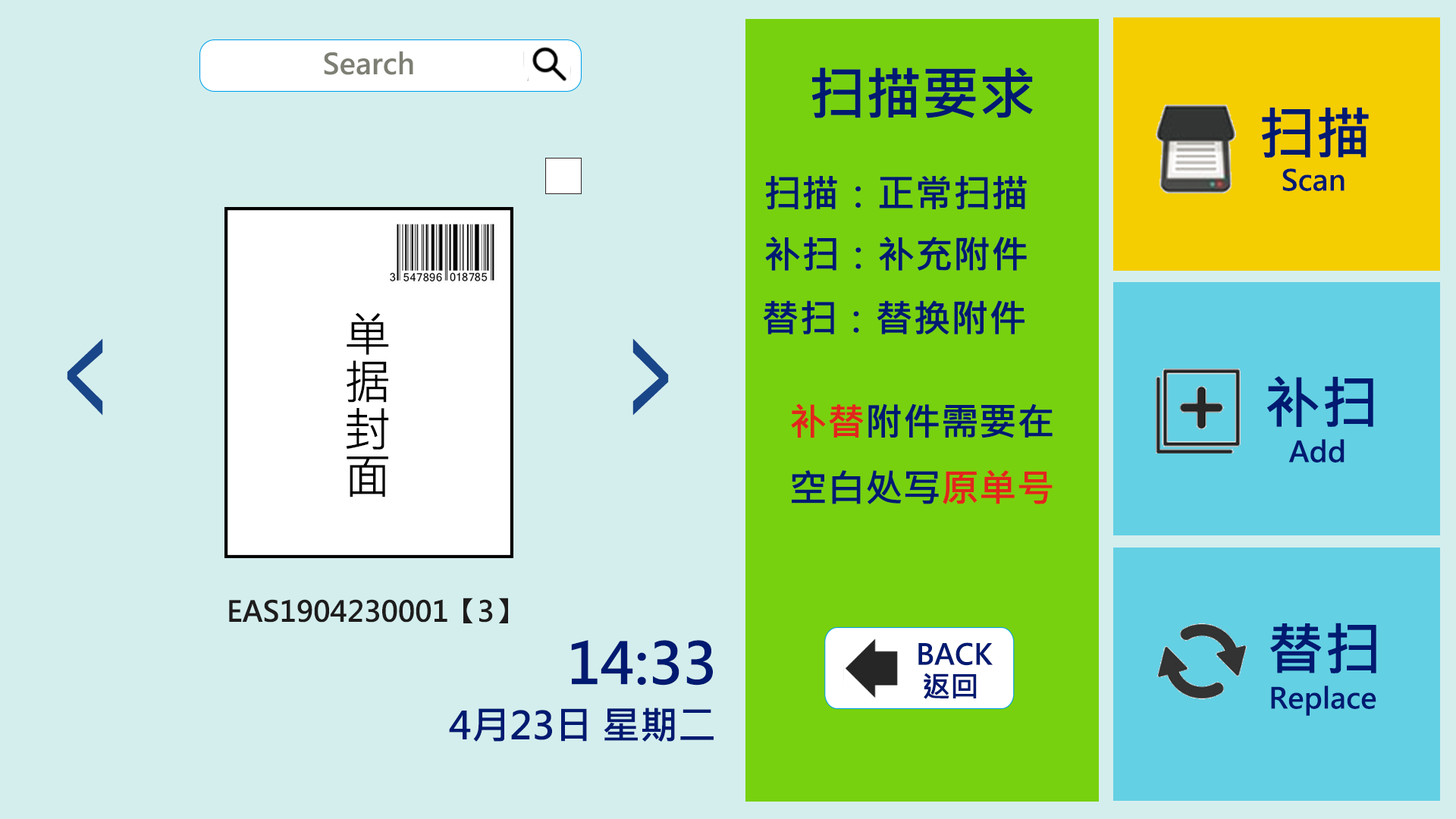
<style>
.page{position:relative;width:1456px;height:819px;background:#d4eeee}
.page>*{position:absolute;margin:0}
.t1{font:28.4px "MicrosoftJhengHeiBold";color:#7e7f74}
.t2{font:56.9px "MicrosoftJhengHeiBold";color:#001a71}
.t3{font:28.4px "MicrosoftJhengHeiBold";color:#001a71}
.t4{font:37.9px "MicrosoftJhengHeiBold";color:#001a71}
.t5{font:146.2px "MicrosoftJhengHeiBold";color:#18468a;scale:0.52 1}
.t6{font:37.9px "MicrosoftJhengHeiBold";color:#e1261c}
.t7{font:28.4px "MicrosoftJhengHeiBold";color:#1e1c1c}
</style>
<div class="page">
<p class="t1" style="left:324px;top:51px;width:89px;height:24px">Search</p>
<p class="t2" style="left:811px;top:67px;width:222px;height:51px">扫描要求</p>
<p class="t2" style="left:1262px;top:107px;width:107px;height:51px">扫描</p>
<p class="t3" style="left:1282px;top:168px;width:63px;height:23px">Scan</p>
<p class="t4" style="left:765px;top:176px;width:262px;height:33px">扫描：正常扫描</p>
<p class="t4" style="left:765px;top:237px;width:262px;height:34px">补扫：补充附件</p>
<p class="t4" style="left:763px;top:300px;width:261px;height:34px">替扫：替换附件</p>
<p class="t5" style="left:67px;top:338px;width:36px;height:78px;rotate:180deg">＞</p>
<p class="t5" style="left:632px;top:338px;width:37px;height:78px">＞</p>
<p class="t2" style="left:1267px;top:376px;width:106px;height:51px">补扫</p>
<p class="t4" style="left:791px;top:403px;width:262px;height:101px;text-align:center"><span class="t6">补替</span>附件需要在<br>空白处写<span class="t6">原单号</span></p>
<p class="t3" style="left:1288px;top:439px;width:57px;height:24px">Add</p>
<p class="t7" style="left:229px;top:598px;width:279px;height:25px">EAS1904230001【3】</p>
<p class="t2" style="left:1270px;top:623px;width:106px;height:50px">替扫</p>
<p class="t2" style="left:571px;top:640px;width:142px;height:46px">14:33</p>
<p class="t3" style="left:918px;top:642px;width:75px;height:24px">BACK</p>
<p class="t3" style="left:924px;top:673px;width:53px;height:26px">返回</p>
<p class="t3" style="left:1271px;top:686px;width:105px;height:30px">Replace</p>
<p class="t4" style="left:449px;top:708px;width:265px;height:34px">4月23日 星期二</p>
</div>
